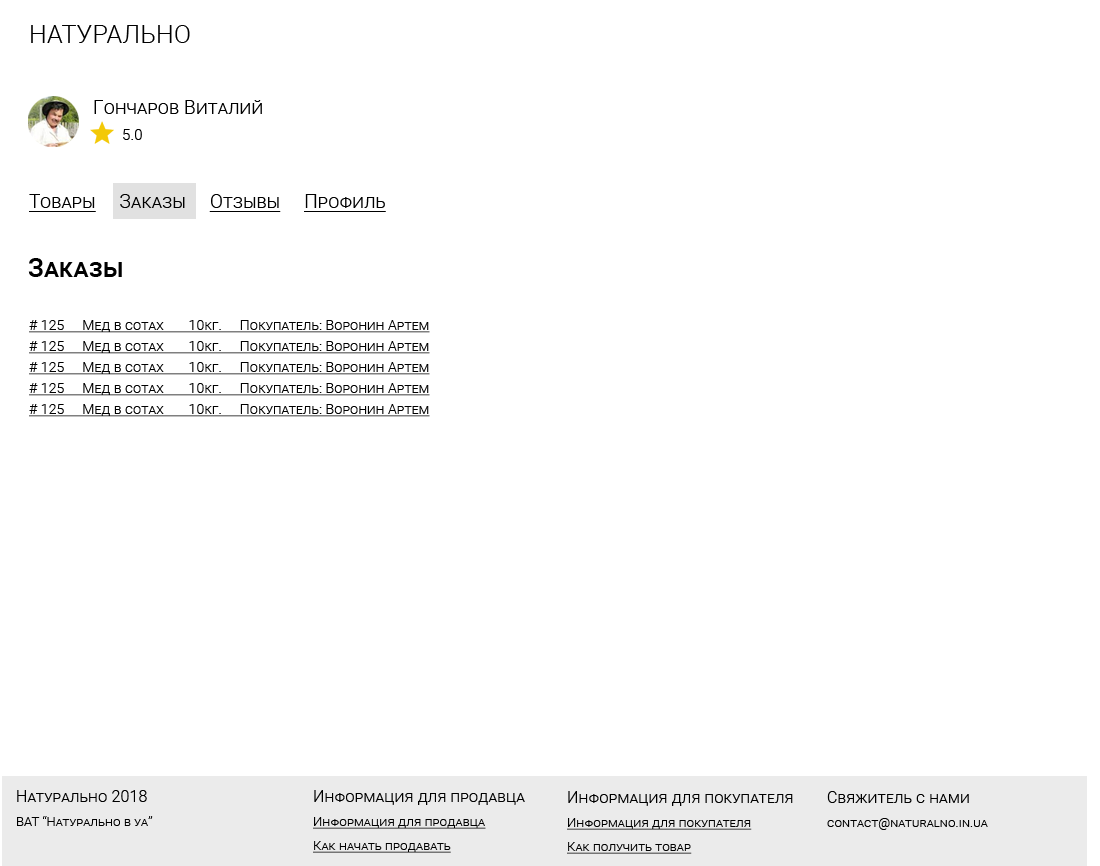
<style>
.page{position:relative;width:1100px;height:866px;background:#ffffff}
.page>*{position:absolute;margin:0}
.t1{font:25px "Roboto-Light";letter-spacing:0.01em;color:#000000;font-variant:small-caps}
.t2{font:19px "Roboto-Light";letter-spacing:0.01em;color:#000000;font-variant:small-caps}
.t3{font:15px "Roboto-Light";letter-spacing:0.01em;color:#000000;font-variant:small-caps}
.t4{font:19px "Roboto-Light";letter-spacing:0.01em;color:#000000;font-variant:small-caps;text-decoration:underline}
.t5{font:26px "Roboto-Medium";letter-spacing:0.01em;color:#000000;font-variant:small-caps}
.t6{font:14px/21px "Roboto-Light";letter-spacing:0.01em;color:#000000;font-variant:small-caps;text-decoration:underline}
.t7{font:13px/24px "Roboto-Light";letter-spacing:0.01em;color:#000000;font-variant:small-caps}
.t8{font:16px/26px "Roboto-Light";letter-spacing:0.01em;color:#000000;font-variant:small-caps}
.t9{font:13px/24px "Roboto-Light";letter-spacing:0.01em;color:#000000;font-variant:small-caps;text-decoration:underline}
</style>
<div class="page">
<p class="t1" style="left:31px;top:25px;width:159px;height:18px">НАТУРАЛЬНО</p>
<p class="t2" style="left:94px;top:100px;width:168px;height:14px">Гончаров Виталий</p>
<p class="t3" style="left:123px;top:129px;width:19px;height:11px">5.0</p>
<p class="t4" style="left:29px;top:194px;width:357px;height:18px">Товары<span class="t2">     Заказы     </span>Отзывы     Профиль</p>
<p class="t5" style="left:28px;top:258px;width:94px;height:19px">Заказы</p>
<p class="t6" style="left:29px;top:320px;width:401px;height:97px"># 125     Мед в сотах       10кг.     Покупатель: Воронин Артем<br># 125     Мед в сотах       10кг.     Покупатель: Воронин Артем<br># 125     Мед в сотах       10кг.     Покупатель: Воронин Артем<br># 125     Мед в сотах       10кг.     Покупатель: Воронин Артем<br># 125     Мед в сотах       10кг.     Покупатель: Воронин Артем</p>
<p class="t7" style="left:17px;top:790px;width:136px;height:36px"><span class="t8">Натурально 2018<br></span>ВАТ “Натурально в уа”</p>
<p class="t9" style="left:313px;top:790px;width:212px;height:63px"><span class="t8">Информация для продавца<br></span>Информация для продавца<br>Как начать продавать</p>
<p class="t9" style="left:567px;top:791px;width:226px;height:63px"><span class="t8">Информация для покупателя<br></span>Информация для покупателя<br>Как получить товар</p>
<p class="t7" style="left:827px;top:791px;width:161px;height:39px"><span class="t8">Свяжитель с нами<br></span>contact@naturalno.in.ua</p>
</div>
